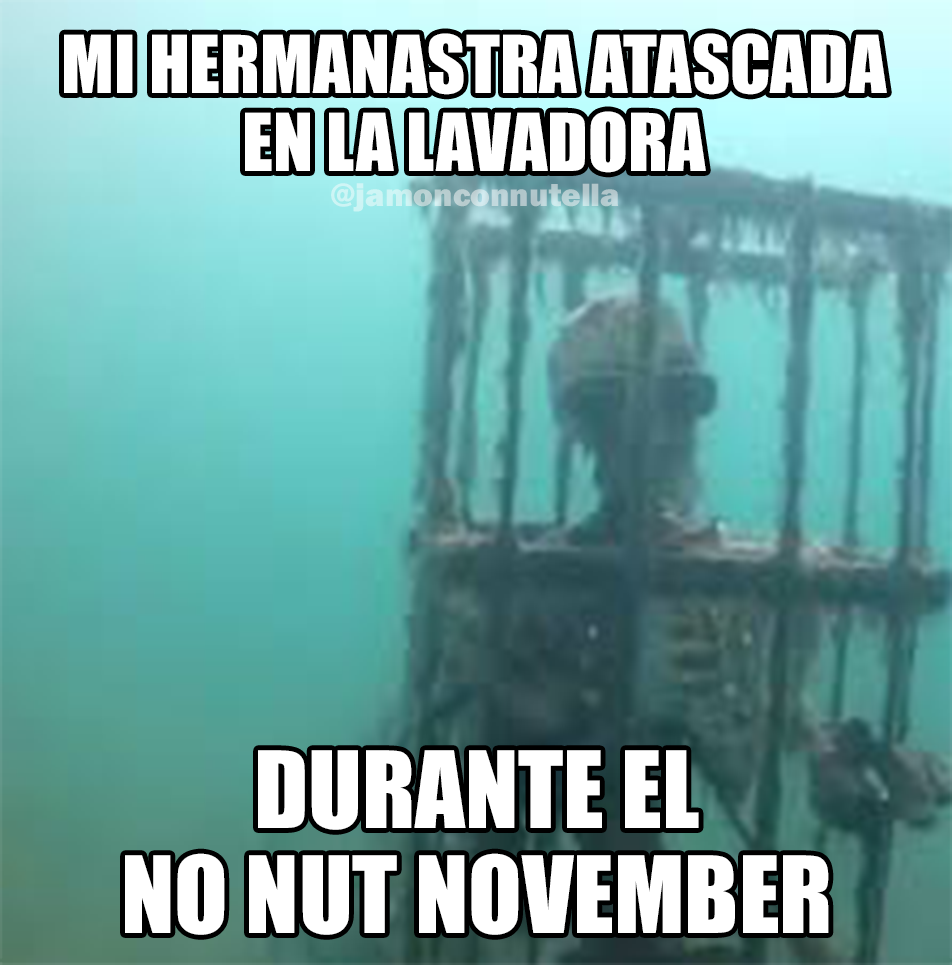
<style>
.page{position:relative;width:952px;height:965px}
.page>*{position:absolute;margin:0}
.t1{font:73.7px "Impact";color:#ffffff}
.t2{font:33.4px "FranklinGothic-Heavy"}
.t3{font:98.2px "Impact";color:#ffffff}
</style>
<div class="page">
<p class="t1" style="left:64px;top:33px;width:823px;height:140px;text-align:center">MI HERMANASTRA ATASCADA<br>EN LA LAVADORA</p>
<p class="t2" style="left:331px;top:183px;width:288px;height:29px">@jamonconnutella</p>
<p class="t3" style="left:125px;top:750px;width:704px;height:185px;text-align:center">DURANTE EL<br>NO NUT NOVEMBER</p>
</div>
